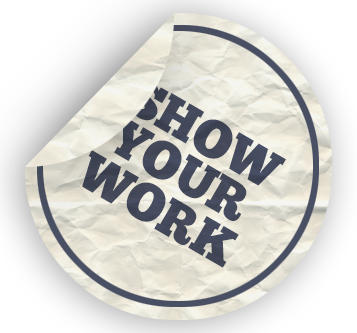
<style>
.page{position:relative;width:357px;height:333px}
.page>*{position:absolute;margin:0}
.t1{font:52.4px/43.7px "ChunkFive";color:#4b526c}
.t2{font:52.4px/45.4px "ChunkFive";color:#4b526c}
</style>
<div class="page">
<p class="t1" style="left:82px;top:79px;width:204px;height:189px;text-align:center;rotate:30deg">SHOW<br>YOUR<br><span class="t2">WORK</span></p>
</div>
